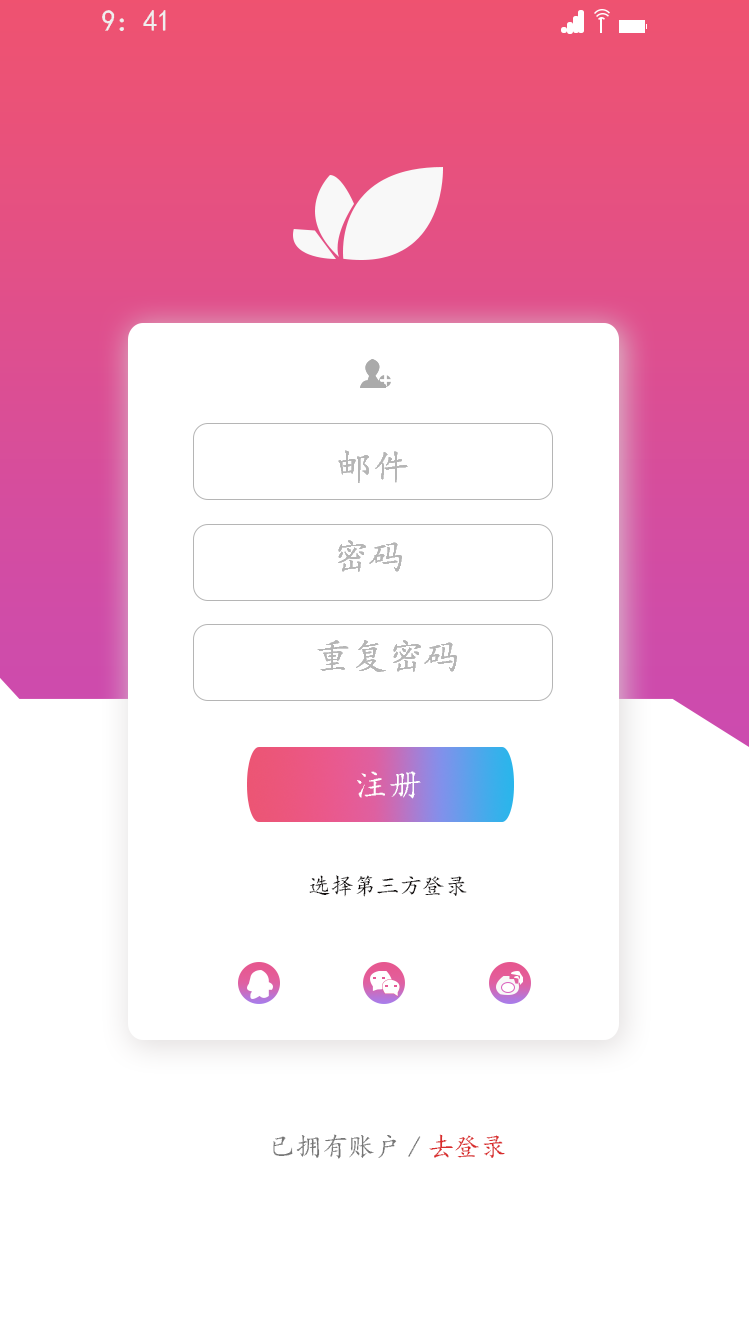
<style>
.page{position:relative;width:750px;height:1334px;background:#ffffff}
.page>*{position:absolute;margin:0}
.t1{font:29.3px "¿¬Ìå";color:#efefef;scale:0.95 1}
.t2{font:35.7px "¿¬Ìå";color:#b5b5b5}
.t3{font:34.2px "¿¬Ìå";color:#ffffff}
.t4{font:23px "¿¬Ìå";color:#120e0e}
.t5{font:26.8px "¿¬Ìå";color:#767676}
.t6{font:26.8px "¿¬Ìå";color:#d92c2c}
</style>
<div class="page">
<p class="t1" style="left:102px;top:10px;width:64px;height:21px">9：41</p>
<p class="t2" style="left:338px;top:450px;width:70px;height:33px">邮件</p>
<p class="t2" style="left:338px;top:450px;width:70px;height:33px">邮件</p>
<p class="t2" style="left:338px;top:450px;width:70px;height:33px">邮件</p>
<p class="t2" style="left:338px;top:450px;width:70px;height:33px">邮件</p>
<p class="t2" style="left:338px;top:540px;width:64px;height:32px">密码</p>
<p class="t2" style="left:338px;top:540px;width:64px;height:32px">密码</p>
<p class="t2" style="left:338px;top:540px;width:64px;height:32px">密码</p>
<p class="t2" style="left:338px;top:540px;width:64px;height:32px">密码</p>
<p class="t2" style="left:317px;top:640px;width:140px;height:32px">重复密码</p>
<p class="t2" style="left:317px;top:640px;width:140px;height:32px">重复密码</p>
<p class="t2" style="left:317px;top:640px;width:140px;height:32px">重复密码</p>
<p class="t2" style="left:317px;top:640px;width:140px;height:32px">重复密码</p>
<p class="t3" style="left:357px;top:771px;width:64px;height:28px;rotate:180deg">注册</p>
<p class="t4" style="left:309px;top:875px;width:158px;height:22px">选择第三方登录</p>
<p class="t5" style="left:273px;top:1134px;width:232px;height:25px">已拥有账户/<span class="t6">去登录</span></p>
</div>
